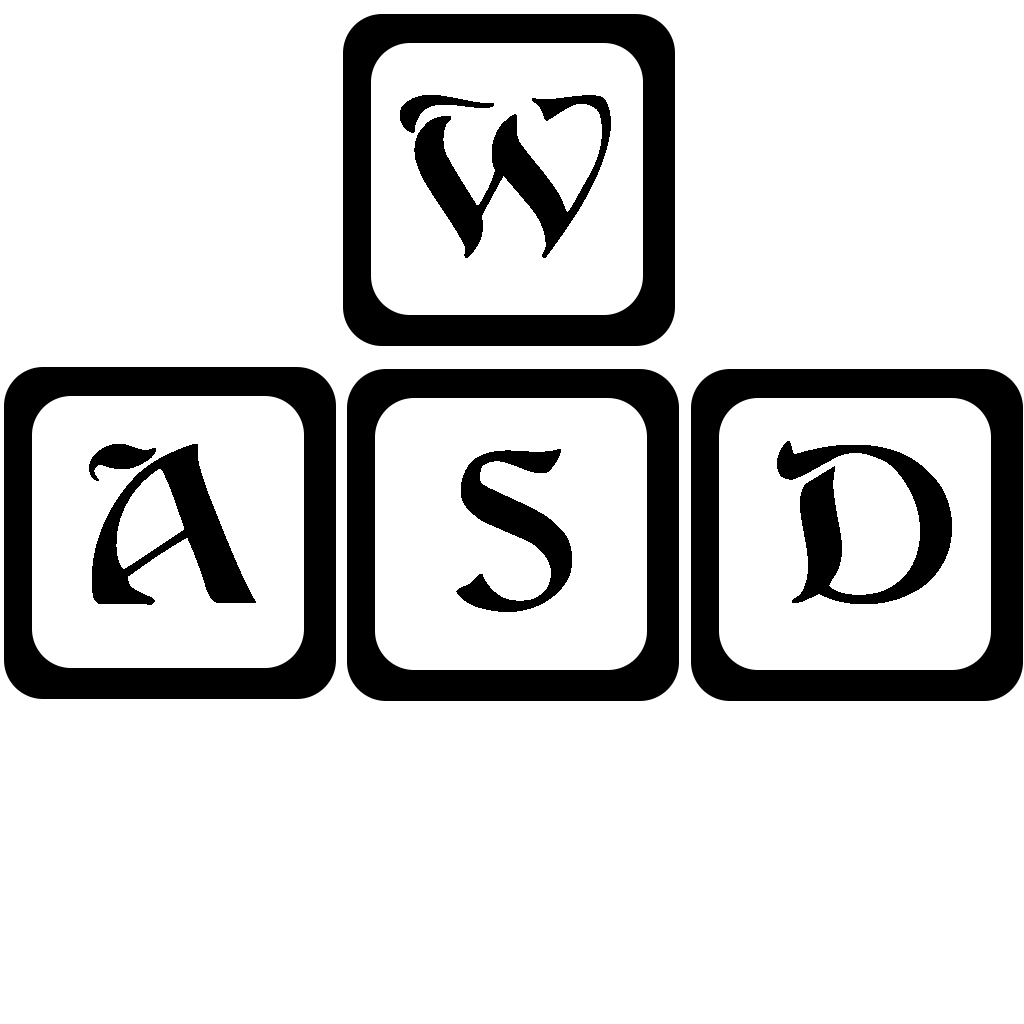
<style>
.page{position:relative;width:1024px;height:1024px;background:#ffffff}
.page>*{position:absolute;margin:0}
.t1{font:218.9px "Argos-Regular";letter-spacing:0.01em;color:#000000}
</style>
<div class="page">
<p class="t1" style="left:400px;top:95px;width:211px;height:163px">W</p>
<p class="t1" style="left:89px;top:444px;width:167px;height:161px">A</p>
<p class="t1" style="left:456px;top:449px;width:116px;height:163px">S</p>
<p class="t1" style="left:777px;top:441px;width:175px;height:163px">D</p>
</div>
